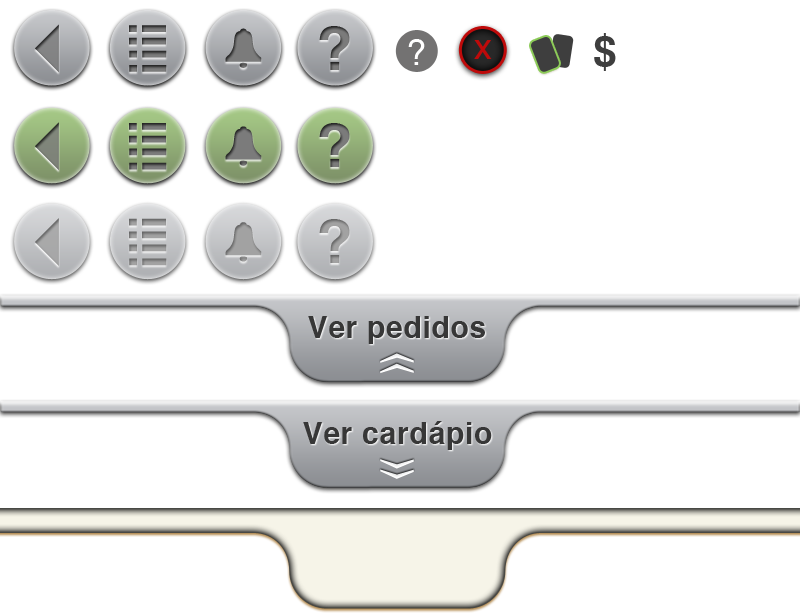
<style>
.page{position:relative;width:800px;height:614px;background:#ffffff}
.page>*{position:absolute;margin:0}
.t1{font:60.2px "Helvetica-Bold";letter-spacing:0.025em;color:#7b7b7b}
.t2{font:35.8px "Helvetica";letter-spacing:0.025em;color:#fefefe}
.t3{font:35.8px "Helvetica";letter-spacing:0.025em;color:#bf0a0a}
.t4{font:42.8px "Helvetica-Bold";letter-spacing:0.025em;color:#3e3e3e}
.t5{font:60.2px "Helvetica-Bold";letter-spacing:0.025em;color:#9d9d9d}
.t6{font:29.9px "Helvetica-Bold";letter-spacing:0.025em;color:#373737}
</style>
<div class="page">
<p class="t1" style="left:319px;top:26px;width:31px;height:44px">?</p>
<p class="t2" style="left:408px;top:39px;width:17px;height:26px">?</p>
<p class="t3" style="left:474px;top:40px;width:18px;height:19px">x</p>
<p class="t4" style="left:594px;top:33px;width:22px;height:38px">$</p>
<p class="t1" style="left:319px;top:123px;width:31px;height:44px">?</p>
<p class="t5" style="left:319px;top:219px;width:31px;height:44px">?</p>
<p class="t6" style="left:308px;top:316px;width:177px;height:28px">Ver pedidos</p>
<p class="t6" style="left:303px;top:421px;width:189px;height:29px">Ver cardápio</p>
</div>
